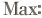
<style>
.page{position:relative;width:42px;height:18px;background:#ffffff}
.page>*{position:absolute;margin:0}
.t1{font:18px "RyuminPro-ExBold";letter-spacing:-0.08em;color:#756d63}
</style>
<div class="page">
<p class="t1" style="left:3px;top:1px;width:35px;height:15px">Max</p>
</div>
